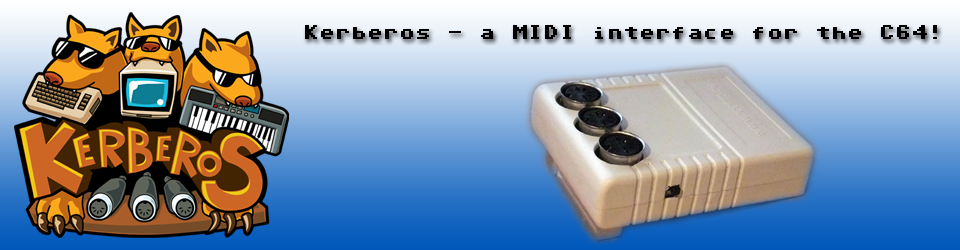
<style>
.page{position:relative;width:960px;height:250px}
.page>*{position:absolute;margin:0}
.t1{font:16.2px "C64ProMono-Style";color:#000000}
</style>
<div class="page">
<p class="t1" style="left:305px;top:25px;width:632px;height:14px">Kerberos - a MIDI interface for the C64!</p>
</div>
